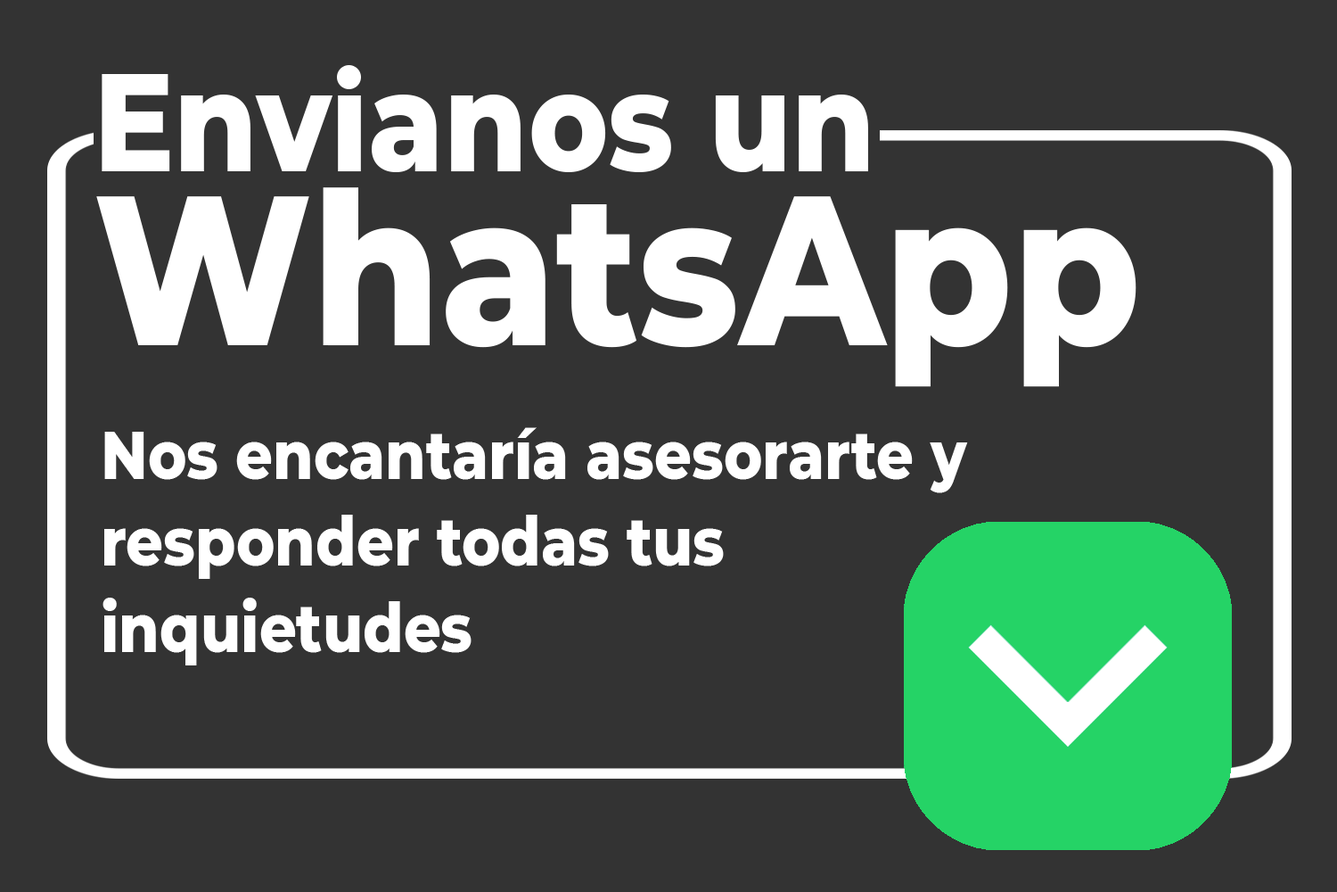
<style>
.page{position:relative;width:1337px;height:892px;background:#333333}
.page>*{position:absolute;margin:0}
.t1{font:67.1px/86.5px "Montserrat-ExtraBold";color:#ffffff;scale:0.87 1}
</style>
<div class="page">
<p class="t1" style="left:103px;top:427px;width:865px;height:238px">Nos encantaría asesorarte y responder todas tus <br>inquietudes</p>
</div>
